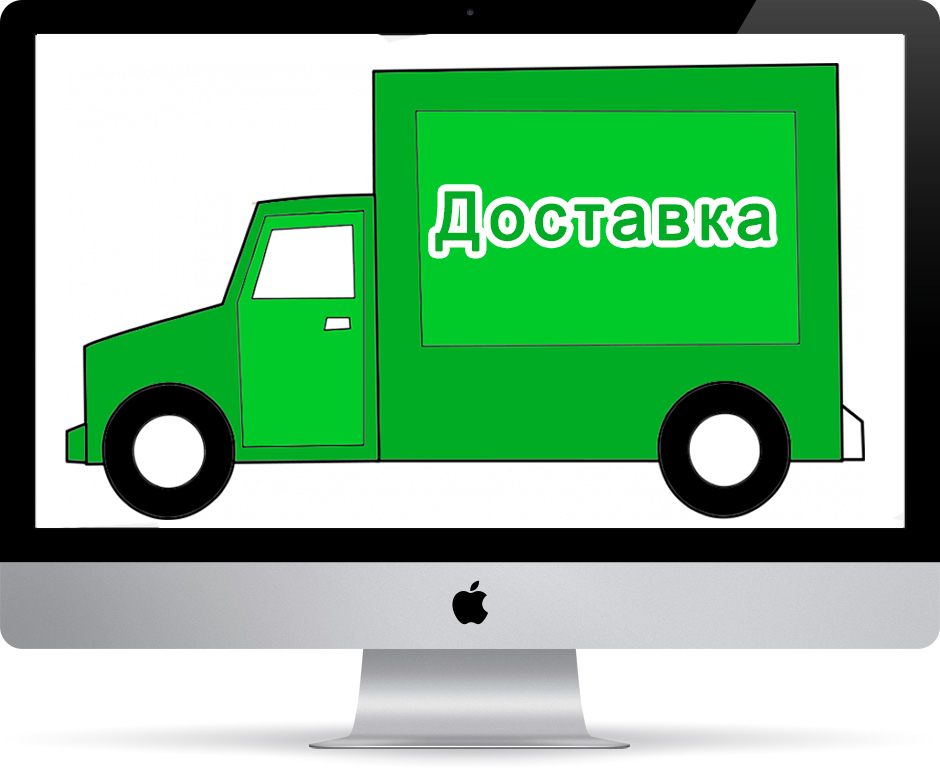
<style>
.page{position:relative;width:940px;height:770px;background:#ffffff}
.page>*{position:absolute;margin:0}
.t1{font:65.8px "ArialMT";letter-spacing:0.09em;color:#00ac24;font-weight:bold}
</style>
<div class="page">
<p class="t1" style="left:435px;top:191px;width:336px;height:61px">Доставка</p>
</div>
